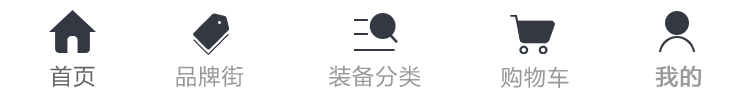
<style>
.page{position:relative;width:750px;height:98px;background:#ffffff}
.page>*{position:absolute;margin:0}
.t1{font:22px "MicrosoftYaHei";letter-spacing:0.06em;color:#666666}
.t2{font:22px "MicrosoftYaHei";letter-spacing:0.06em;color:#999999}
.t3{font:22px "MicrosoftYaHei";letter-spacing:0.06em;color:#999999;font-weight:bold}
</style>
<div class="page">
<p class="t1" style="left:50px;top:65px;width:45px;height:22px">首页</p>
<p class="t2" style="left:176px;top:65px;width:68px;height:22px">品牌街</p>
<p class="t2" style="left:329px;top:65px;width:92px;height:22px">装备分类</p>
<p class="t3" style="left:655px;top:65px;width:46px;height:22px">我的</p>
<p class="t2" style="left:501px;top:66px;width:68px;height:22px">购物车</p>
</div>
